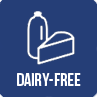
<style>
.page{position:relative;width:97px;height:97px;background:#253e77}
.page>*{position:absolute;margin:0}
.t1{font:18px "BebasNeue";color:#ffffff}
</style>
<div class="page">
<p class="t1" style="left:17px;top:73px;width:64px;height:13px">dairy-free</p>
</div>
